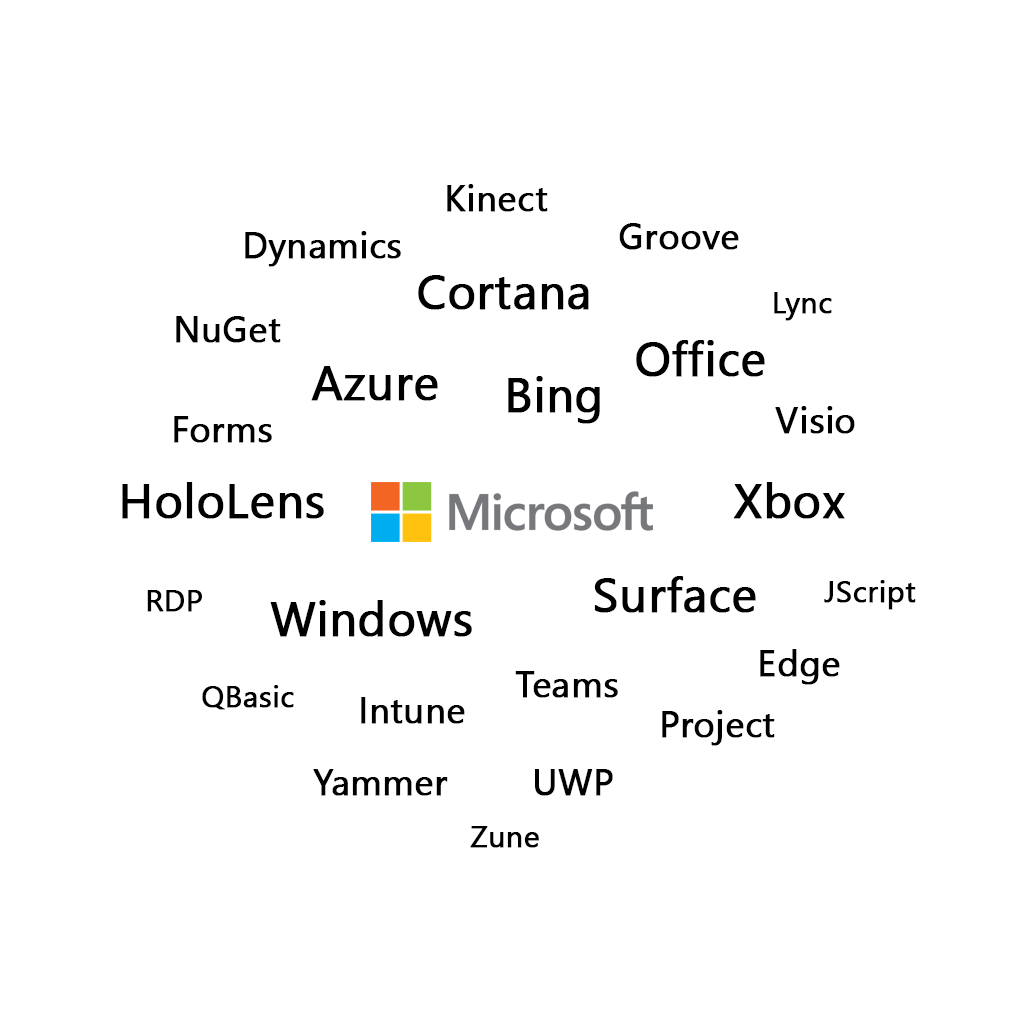
<style>
.page{position:relative;width:1024px;height:1024px;background:#ffffff}
.page>*{position:absolute;margin:0}
.t1{font:36px "SegoeUI";color:#000000;font-weight:bold}
.t2{font:48px "SegoeUI";color:#000000;font-weight:bold}
.t3{font:30px "SegoeUI";color:#000000;font-weight:bold}
</style>
<div class="page">
<p class="t1" style="left:447px;top:184px;width:101px;height:28px">Kinect</p>
<p class="t1" style="left:245px;top:231px;width:156px;height:36px">Dynamics</p>
<p class="t1" style="left:619px;top:223px;width:120px;height:27px">Groove</p>
<p class="t2" style="left:418px;top:275px;width:171px;height:35px">Cortana</p>
<p class="t3" style="left:774px;top:292px;width:58px;height:29px">Lync</p>
<p class="t1" style="left:176px;top:316px;width:105px;height:27px">NuGet</p>
<p class="t2" style="left:636px;top:340px;width:129px;height:37px">Office</p>
<p class="t2" style="left:311px;top:366px;width:127px;height:35px">Azure</p>
<p class="t2" style="left:508px;top:376px;width:92px;height:48px">Bing</p>
<p class="t1" style="left:775px;top:406px;width:80px;height:28px">Visio</p>
<p class="t1" style="left:174px;top:416px;width:98px;height:27px">Forms</p>
<p class="t2" style="left:122px;top:482px;width:202px;height:37px">HoloLens</p>
<p class="t2" style="left:733px;top:482px;width:112px;height:37px">Xbox</p>
<p class="t2" style="left:594px;top:576px;width:162px;height:37px">Surface</p>
<p class="t3" style="left:824px;top:580px;width:92px;height:30px">JScript</p>
<p class="t3" style="left:147px;top:590px;width:55px;height:22px">RDP</p>
<p class="t2" style="left:270px;top:600px;width:202px;height:37px">Windows</p>
<p class="t1" style="left:760px;top:649px;width:80px;height:36px">Edge</p>
<p class="t1" style="left:515px;top:671px;width:103px;height:27px">Teams</p>
<p class="t3" style="left:202px;top:685px;width:92px;height:25px">QBasic</p>
<p class="t1" style="left:361px;top:697px;width:104px;height:27px">Intune</p>
<p class="t1" style="left:662px;top:710px;width:113px;height:36px">Project</p>
<p class="t1" style="left:313px;top:769px;width:135px;height:27px">Yammer</p>
<p class="t1" style="left:535px;top:769px;width:78px;height:27px">UWP</p>
<p class="t3" style="left:470px;top:826px;width:69px;height:22px">Zune</p>
</div>
